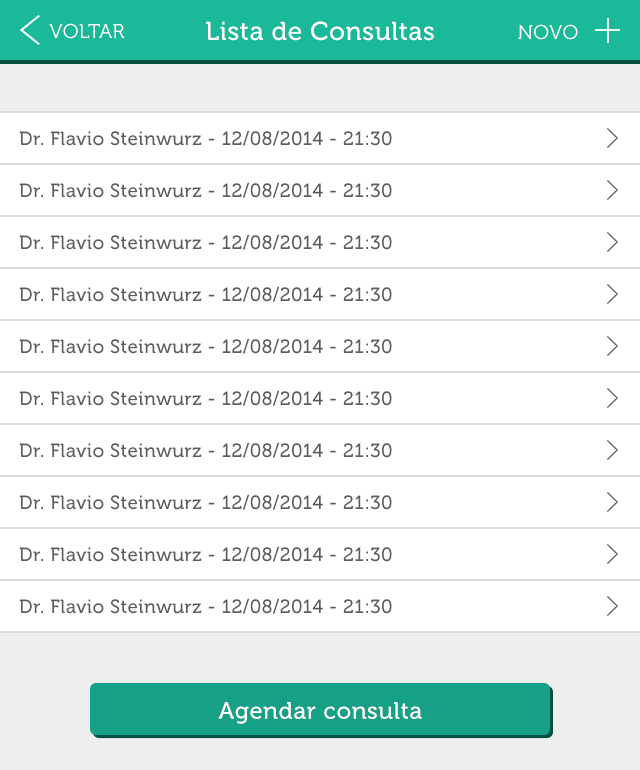
<style>
.page{position:relative;width:640px;height:770px;background:#ffffff}
.page>*{position:absolute;margin:0}
.t1{font:20px "Museo300-Regular";letter-spacing:0.02em;color:#ffffff;text-transform:uppercase}
.t2{font:26px "Museo500-Regular";letter-spacing:0.02em;color:#ffffff}
.t3{font:19px "Museo500-Regular";letter-spacing:0.02em;color:#5c5c5c}
.t4{font:23.8px "Museo500-Regular";letter-spacing:0.02em;color:#ffffff}
</style>
<div class="page">
<p class="t1" style="left:49px;top:23px;width:76px;height:16px">Voltar</p>
<p class="t2" style="left:206px;top:21px;width:228px;height:20px">Lista de Consultas</p>
<p class="t1" style="left:518px;top:24px;width:60px;height:16px">NOVO</p>
<p class="t3" style="left:19px;top:130px;width:373px;height:16px">Dr. Flavio Steinwurz - 12/08/2014 - 21:30</p>
<p class="t3" style="left:19px;top:182px;width:373px;height:16px">Dr. Flavio Steinwurz - 12/08/2014 - 21:30</p>
<p class="t3" style="left:19px;top:234px;width:373px;height:16px">Dr. Flavio Steinwurz - 12/08/2014 - 21:30</p>
<p class="t3" style="left:19px;top:286px;width:373px;height:16px">Dr. Flavio Steinwurz - 12/08/2014 - 21:30</p>
<p class="t3" style="left:19px;top:338px;width:373px;height:16px">Dr. Flavio Steinwurz - 12/08/2014 - 21:30</p>
<p class="t3" style="left:19px;top:390px;width:373px;height:16px">Dr. Flavio Steinwurz - 12/08/2014 - 21:30</p>
<p class="t3" style="left:19px;top:442px;width:373px;height:16px">Dr. Flavio Steinwurz - 12/08/2014 - 21:30</p>
<p class="t3" style="left:19px;top:494px;width:373px;height:16px">Dr. Flavio Steinwurz - 12/08/2014 - 21:30</p>
<p class="t3" style="left:19px;top:546px;width:373px;height:16px">Dr. Flavio Steinwurz - 12/08/2014 - 21:30</p>
<p class="t3" style="left:19px;top:598px;width:373px;height:16px">Dr. Flavio Steinwurz - 12/08/2014 - 21:30</p>
<p class="t4" style="left:218px;top:702px;width:204px;height:22px">Agendar consulta</p>
</div>
